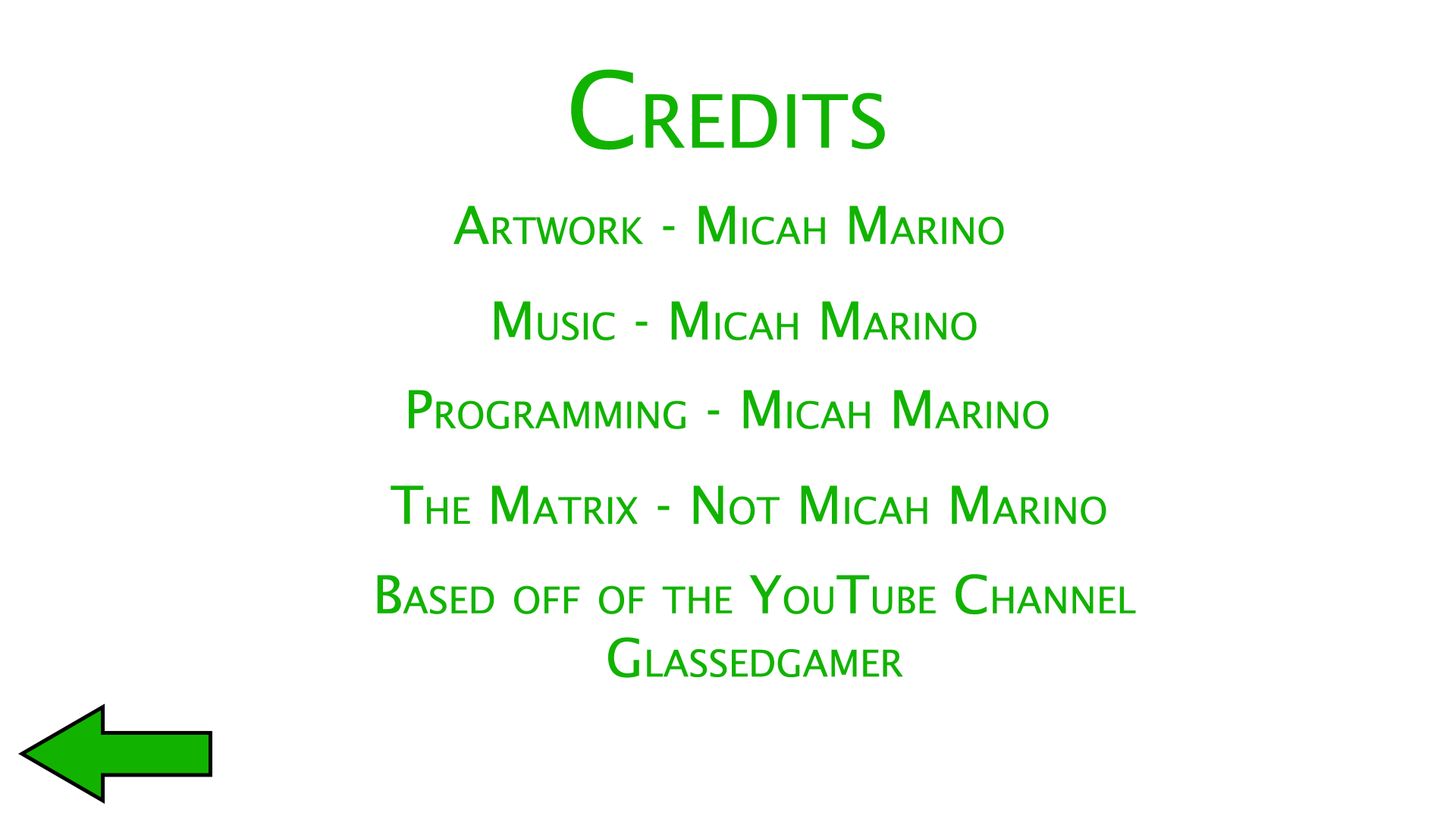
<style>
.page{position:relative;width:1456px;height:819px;background:#ffffff}
.page>*{position:absolute;margin:0}
.t1{font:105.3px "LucidaSans";color:#11b300;font-variant:small-caps}
.t2{font:52.7px "LucidaSans";color:#11b300;font-variant:small-caps}
</style>
<div class="page">
<p class="t1" style="left:571px;top:69px;width:314px;height:81px">Credits</p>
<p class="t2" style="left:453px;top:206px;width:551px;height:39px">Artwork - Micah Marino</p>
<p class="t2" style="left:494px;top:301px;width:483px;height:39px">Music - Micah Marino</p>
<p class="t2" style="left:409px;top:390px;width:640px;height:39px">Programming - Micah Marino</p>
<p class="t2" style="left:391px;top:485px;width:715px;height:40px">The Matrix - Not Micah Marino</p>
<p class="t2" style="left:377px;top:574px;width:759px;height:104px;text-align:center">Based off of the YouTube Channel<br>Glassedgamer</p>
</div>
